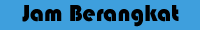
<style>
.page{position:relative;width:200px;height:30px;background:#3e9fdd}
.page>*{position:absolute;margin:0}
.t1{font:24px "Bauhaus93";color:#000000}
</style>
<div class="page">
<p class="t1" style="left:22px;top:5px;width:157px;height:22px">Jam Berangkat</p>
</div>
